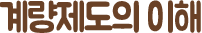
<style>
.page{position:relative;width:202px;height:33px;background:#6a4126}
.page>*{position:absolute;margin:0}
.t1{font:40px "BMJUA";letter-spacing:-0.05em;color:#6a4126;scale:0.9 1}
</style>
<div class="page">
<p class="t1" style="left:0px;top:0px;width:201px;height:33px">계량제도의 이해</p>
</div>
